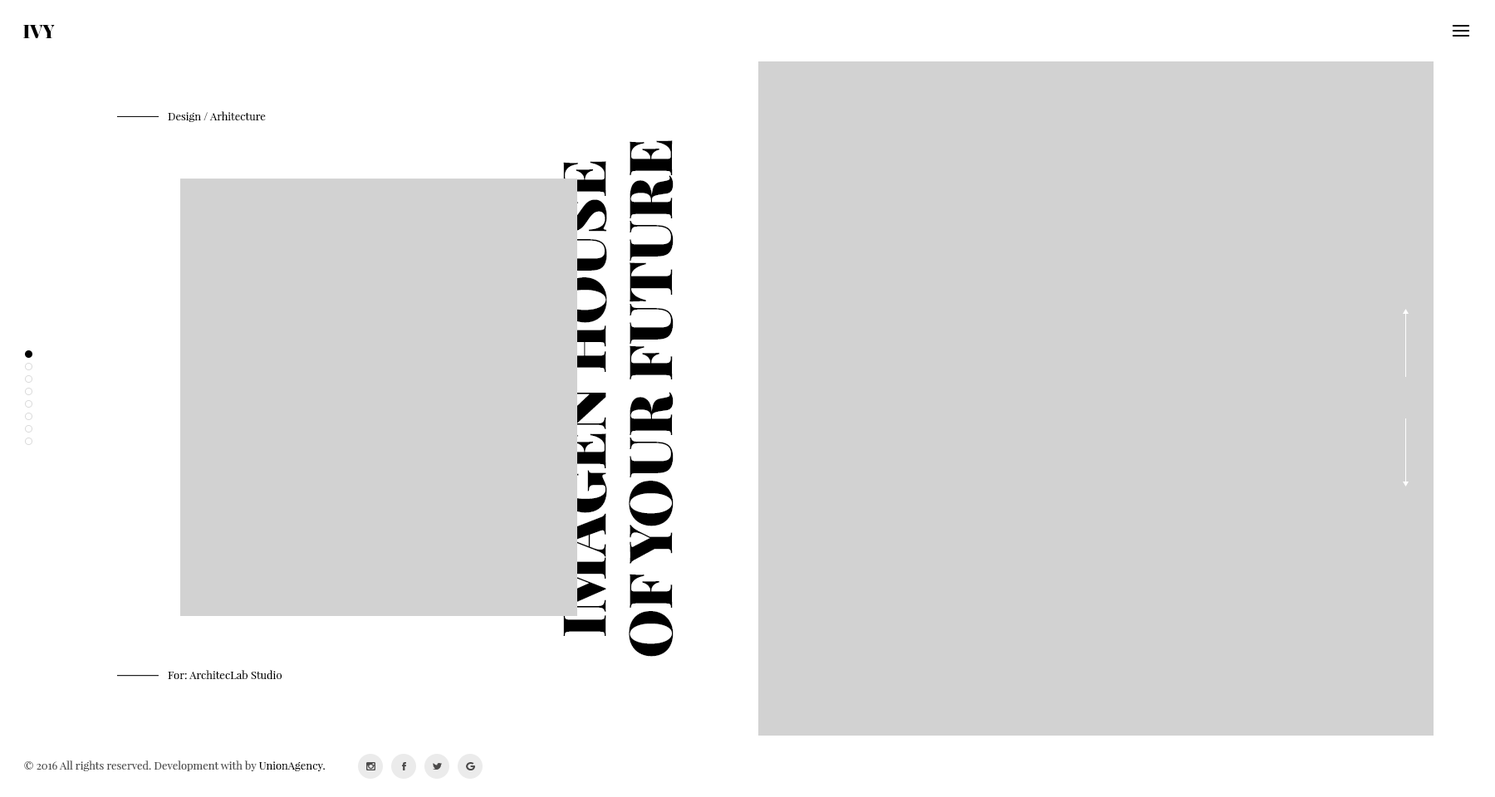
<style>
.page{position:relative;width:1495px;height:797px;background:#d2d2d2}
.page>*{position:absolute;margin:0}
.t1{font:18.3px "PlayfairDisplay-Black";color:#000000}
.t2{font:10.8px "PlayfairDisplay-Regular";color:#000000}
.t3{font:59.8px/66.4px "PlayfairDisplay-Black";color:#000000}
.t4{font:10.8px "PlayfairDisplay-Regular";color:#494949}
</style>
<div class="page">
<p class="t1" style="left:23px;top:25px;width:32px;height:13px">IVY</p>
<p class="t2" style="left:168px;top:111px;width:98px;height:11px">Design / Arhitecture</p>
<p class="t3" style="left:562px;top:140px;width:112px;height:517px;text-align:center;rotate:-90deg">IMAGEN HOUSE<br>OF YOUR FUTURE</p>
<p class="t2" style="left:168px;top:670px;width:114px;height:10px">For: ArchitecLab Studio</p>
<p class="t4" style="left:24px;top:761px;width:302px;height:11px">© 2016 All rights reserved. Development with by <span class="t2">UnionAgency.</span></p>
</div>
